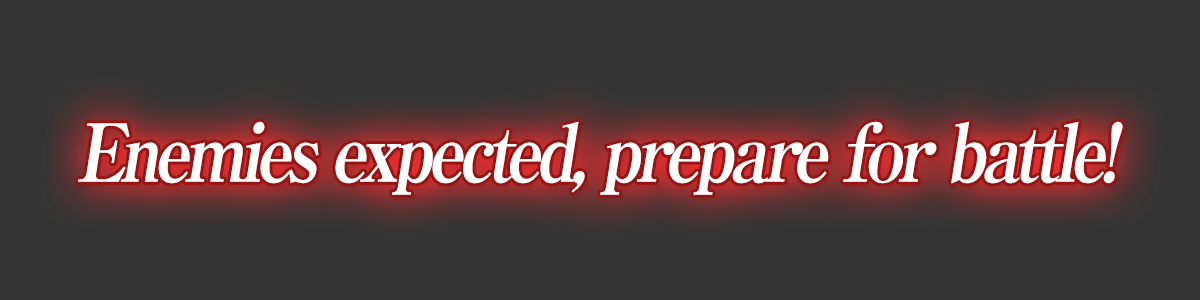
<style>
.page{position:relative;width:1200px;height:300px;background:#333333}
.page>*{position:absolute;margin:0}
.t1{font:80px "RyuminPro-ExBold";letter-spacing:-0.08em;color:#ffffff;font-style:italic;scale:0.9 1}
</style>
<div class="page">
<p class="t1" style="left:78px;top:121px;width:1045px;height:74px">Enemies expected, prepare for battle!</p>
</div>
